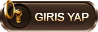
<style>
.page{position:relative;width:98px;height:32px}
.page>*{position:absolute;margin:0}
.t1{font:11px "ArialMT";color:#fbf9f9}
</style>
<div class="page">
<p class="t1" style="left:35px;top:13px;width:54px;height:8px">GIRIS YAP</p>
<p class="t1" style="left:35px;top:13px;width:54px;height:8px">GIRIS YAP</p>
</div>
